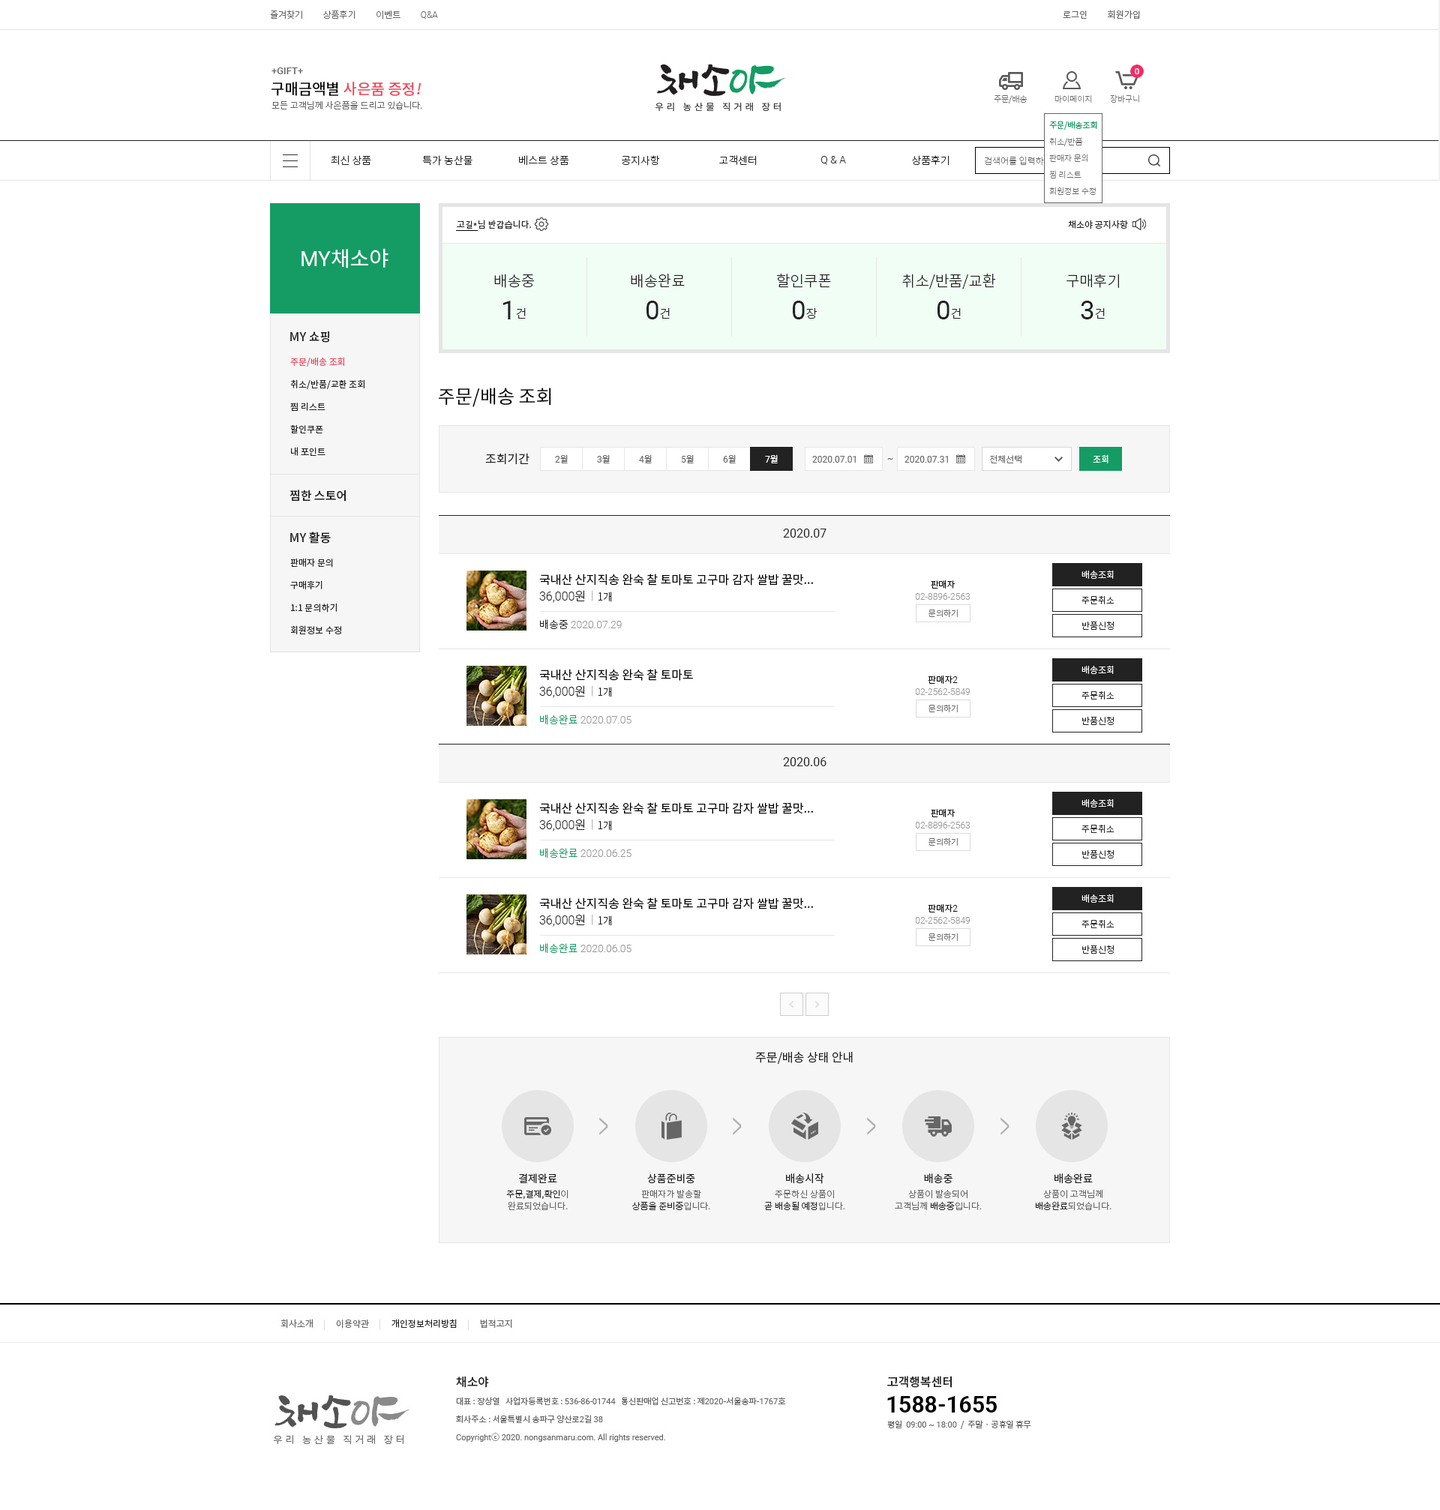
<style>
.page{position:relative;width:1440px;height:1510px;background:#ffffff}
.page>*{position:absolute;margin:0}
.t1{font:9px "NotoSansCJKkr-Light";color:#666666}
.t2{font:9px "Roboto-Light";color:#666666}
.t3{font:9px "NotoSansCJKkr-DemiLight";color:#666666}
.t4{font:9.7px "Roboto-Medium";color:#666666}
.t5{font:15px "NotoSansCJKkr-Medium";color:#ea475c}
.t6{font:15px "NotoSansCJKkr-Medium";color:#000000}
.t7{font:15px "NotoSansCJKkr-Medium";color:#ea475c;font-style:italic}
.t8{font:8.2px "NotoSansCJKkr-Thin";color:#666666}
.t9{font:8.2px/16.5px "NotoSansCJKkr-Thin";color:#666666}
.t10{font:8.2px/16.5px "NotoSansCJKkr-Regular";color:#159c65}
.t11{font:10.5px "NotoSansCJKkr-Light";color:#222222}
.t12{font:10.5px "Roboto-Light";color:#222222}
.t13{font:9px "NotoSansCJKkr-Thin";color:#666666}
.t14{font:9px "NotoSansCJKkr-Regular";color:#222222}
.t15{font:21px "NotoSansCJKkr-Regular";color:#ffffff}
.t16{font:21px "Roboto-Regular";color:#ffffff}
.t17{font:15px "NotoSansCJKkr-Light";color:#222222}
.t18{font:26.2px "Roboto-Regular";color:#222222}
.t19{font:12px "NotoSansCJKkr-Light";color:#222222}
.t20{font:12px "NotoSansCJKkr-Medium";color:#222222}
.t21{font:9px/22.5px "NotoSansCJKkr-Regular";color:#222222}
.t22{font:9px/22.5px "NotoSansCJKkr-Regular";color:#ea475c}
.t23{font:18.7px "NotoSansCJKkr-Regular";color:#000000}
.t24{font:12px "NotoSansCJKkr-Regular";color:#222222}
.t25{font:9px "Roboto-Regular";color:#666666}
.t26{font:9px "NotoSansCJKkr-Regular";color:#666666}
.t27{font:9px "Roboto-Regular";color:#ffffff}
.t28{font:9px "NotoSansCJKkr-Regular";color:#ffffff}
.t29{font:12px "Roboto-Regular";color:#222222}
.t30{font:9px "NotoSansCJKkr-Light";color:#ffffff}
.t31{font:12px "NotoSansCJKkr-Regular";color:#000000}
.t32{font:9px/12px "Roboto-Light";color:#999999}
.t33{font:9px/12px "NotoSansCJKkr-Light";color:#000000}
.t34{font:12px "Roboto-Light";color:#222222}
.t35{font:9px "NotoSansCJKkr-Light";color:#999999}
.t36{font:9px "NotoSansCJKkr-Light";color:#222222}
.t37{font:8.2px "NotoSansCJKkr-Light";color:#666666}
.t38{font:10.5px "Roboto-Light";color:#999999}
.t39{font:9px/12px "Roboto-Light";color:#000000}
.t40{font:10.5px "NotoSansCJKkr-Light";color:#159c65}
.t41{font:10.5px "NotoSansCJKkr-Regular";color:#222222}
.t42{font:9px/12px "NotoSansCJKkr-Light";color:#666666}
.t43{font:9px/12px "NotoSansCJKkr-Light";color:#222222}
</style>
<div class="page">
<p class="t1" style="left:270px;top:10px;width:168px;height:9px">즐겨찾기          상품후기          이벤트          <span class="t2">Q&amp;A</span></p>
<p class="t3" style="left:1063px;top:10px;width:77px;height:9px">로그인          회원가입</p>
<p class="t4" style="left:271px;top:67px;width:32px;height:7px">+GIFT+</p>
<p class="t5" style="left:271px;top:82px;width:150px;height:14px"><span class="t6">구매금액별 </span>사은품 증정<span class="t7">!</span></p>
<p class="t1" style="left:271px;top:100px;width:151px;height:9px">모든 고객님께 사은품을 드리고 있습니다.</p>
<p class="t8" style="left:994px;top:94px;width:33px;height:9px">주문/배송</p>
<p class="t8" style="left:1054px;top:95px;width:38px;height:8px">마이페이지</p>
<p class="t8" style="left:1110px;top:94px;width:29px;height:9px">장바구니</p>
<p class="t9" style="left:1049px;top:121px;width:48px;height:74px"><span class="t10">주문/배송조회<br></span>취소/반품<br>판매자 문의<br>찜 리스트<br>회원정보 수정</p>
<p class="t11" style="left:331px;top:155px;width:40px;height:10px">최신 상품</p>
<p class="t11" style="left:422px;top:155px;width:50px;height:11px">특가 농산물</p>
<p class="t11" style="left:519px;top:155px;width:50px;height:11px">베스트 상품</p>
<p class="t11" style="left:622px;top:155px;width:38px;height:11px">공지사항</p>
<p class="t11" style="left:719px;top:155px;width:38px;height:11px">고객센터</p>
<p class="t12" style="left:821px;top:156px;width:25px;height:9px">Q &amp; A</p>
<p class="t11" style="left:912px;top:155px;width:37px;height:11px">상품후기</p>
<p class="t13" style="left:984px;top:156px;width:76px;height:10px">검색어를 입력하세요</p>
<p class="t14" style="left:457px;top:220px;width:74px;height:9px">고길*님 반갑습니다.</p>
<p class="t14" style="left:1068px;top:220px;width:60px;height:9px">채소야 공지사항</p>
<p class="t15" style="left:301px;top:248px;width:87px;height:20px"><span class="t16">MY</span>채소야</p>
<p class="t17" style="left:494px;top:274px;width:40px;height:14px">배송중</p>
<p class="t17" style="left:631px;top:274px;width:54px;height:14px">배송완료</p>
<p class="t17" style="left:777px;top:274px;width:54px;height:14px">할인쿠폰</p>
<p class="t17" style="left:902px;top:274px;width:94px;height:15px">취소/반품/교환</p>
<p class="t17" style="left:1066px;top:274px;width:53px;height:14px">구매후기</p>
<p class="t18" style="left:502px;top:301px;width:24px;height:18px">1<span class="t19">건</span></p>
<p class="t18" style="left:646px;top:301px;width:24px;height:18px">0<span class="t19">건</span></p>
<p class="t18" style="left:793px;top:301px;width:24px;height:18px">0<span class="t19">장</span></p>
<p class="t18" style="left:937px;top:301px;width:24px;height:18px">0<span class="t19">건</span></p>
<p class="t18" style="left:1081px;top:301px;width:24px;height:18px">3<span class="t19">건</span></p>
<p class="t20" style="left:290px;top:331px;width:39px;height:12px">MY 쇼핑</p>
<p class="t21" style="left:290px;top:357px;width:74px;height:99px"><span class="t22">주문/배송 조회<br></span>취소/반품/교환 조회<br>찜 리스트<br>할인쿠폰<br>내 포인트</p>
<p class="t23" style="left:439px;top:388px;width:112px;height:19px">주문/배송 조회</p>
<p class="t24" style="left:485px;top:453px;width:44px;height:11px">조회기간</p>
<p class="t25" style="left:555px;top:454px;width:13px;height:9px">2<span class="t26">월</span></p>
<p class="t25" style="left:597px;top:454px;width:13px;height:9px">3<span class="t26">월</span></p>
<p class="t25" style="left:639px;top:454px;width:13px;height:9px">4<span class="t26">월</span></p>
<p class="t25" style="left:681px;top:454px;width:13px;height:9px">5<span class="t26">월</span></p>
<p class="t25" style="left:723px;top:454px;width:13px;height:9px">6<span class="t26">월</span></p>
<p class="t27" style="left:765px;top:454px;width:13px;height:9px">7<span class="t28">월</span></p>
<p class="t25" style="left:812px;top:456px;width:44px;height:7px">2020.07.01</p>
<p class="t25" style="left:887px;top:458px;width:6px;height:2px">~</p>
<p class="t25" style="left:904px;top:456px;width:44px;height:7px">2020.07.31</p>
<p class="t1" style="left:990px;top:455px;width:31px;height:8px">전체선택</p>
<p class="t28" style="left:1093px;top:454px;width:15px;height:9px">조회</p>
<p class="t20" style="left:289px;top:490px;width:57px;height:12px">찜한 스토어</p>
<p class="t20" style="left:290px;top:532px;width:41px;height:12px">MY 활동</p>
<p class="t29" style="left:783px;top:529px;width:43px;height:9px">2020.07</p>
<p class="t21" style="left:290px;top:558px;width:51px;height:76px">판매자 문의<br>구매후기<br>1:1 문의하기<br>회원정보 수정</p>
<p class="t30" style="left:1081px;top:570px;width:33px;height:9px">배송조회</p>
<p class="t31" style="left:539px;top:574px;width:274px;height:12px">국내산 산지직송 완숙 찰 토마토 고구마 감자 쌀밥 꿀맛...</p>
<p class="t32" style="left:915px;top:580px;width:55px;height:20px;text-align:center"><span class="t33">판매자<br></span>02-8896-2563</p>
<p class="t34" style="left:539px;top:590px;width:73px;height:13px">36,000<span class="t19">원  </span><span class="t35">|  </span><span class="t11">1개</span></p>
<p class="t36" style="left:1081px;top:596px;width:33px;height:8px">주문취소</p>
<p class="t37" style="left:928px;top:609px;width:30px;height:8px">문의하기</p>
<p class="t38" style="left:540px;top:619px;width:82px;height:11px"><span class="t11">배송중 </span>2020.07.29</p>
<p class="t36" style="left:1082px;top:621px;width:32px;height:9px">반품신청</p>
<p class="t30" style="left:1081px;top:665px;width:33px;height:9px">배송조회</p>
<p class="t31" style="left:539px;top:669px;width:154px;height:12px">국내산 산지직송 완숙 찰 토마토</p>
<p class="t32" style="left:915px;top:676px;width:55px;height:19px;text-align:center"><span class="t33">판매자</span><span class="t39">2<br></span>02-2562-5849</p>
<p class="t34" style="left:539px;top:685px;width:73px;height:13px">36,000<span class="t19">원  </span><span class="t35">|  </span><span class="t11">1개</span></p>
<p class="t36" style="left:1081px;top:691px;width:33px;height:9px">주문취소</p>
<p class="t37" style="left:928px;top:704px;width:30px;height:8px">문의하기</p>
<p class="t38" style="left:540px;top:715px;width:91px;height:10px"><span class="t40">배송완료 </span>2020.07.05</p>
<p class="t36" style="left:1082px;top:716px;width:32px;height:9px">반품신청</p>
<p class="t29" style="left:783px;top:757px;width:43px;height:9px">2020.06</p>
<p class="t31" style="left:539px;top:802px;width:274px;height:12px">국내산 산지직송 완숙 찰 토마토 고구마 감자 쌀밥 꿀맛...</p>
<p class="t32" style="left:915px;top:809px;width:55px;height:20px;text-align:center"><span class="t33">판매자<br></span>02-8896-2563</p>
<p class="t30" style="left:1081px;top:799px;width:33px;height:9px">배송조회</p>
<p class="t34" style="left:539px;top:819px;width:73px;height:13px">36,000<span class="t19">원  </span><span class="t35">|  </span><span class="t11">1개</span></p>
<p class="t36" style="left:1081px;top:825px;width:33px;height:8px">주문취소</p>
<p class="t37" style="left:928px;top:838px;width:30px;height:8px">문의하기</p>
<p class="t38" style="left:540px;top:848px;width:91px;height:11px"><span class="t40">배송완료 </span>2020.06.25</p>
<p class="t36" style="left:1082px;top:850px;width:32px;height:9px">반품신청</p>
<p class="t30" style="left:1081px;top:894px;width:33px;height:9px">배송조회</p>
<p class="t31" style="left:539px;top:898px;width:274px;height:12px">국내산 산지직송 완숙 찰 토마토 고구마 감자 쌀밥 꿀맛...</p>
<p class="t32" style="left:915px;top:904px;width:55px;height:20px;text-align:center"><span class="t33">판매자</span><span class="t39">2<br></span>02-2562-5849</p>
<p class="t34" style="left:539px;top:914px;width:73px;height:13px">36,000<span class="t19">원  </span><span class="t35">|  </span><span class="t11">1개</span></p>
<p class="t36" style="left:1081px;top:920px;width:33px;height:8px">주문취소</p>
<p class="t37" style="left:928px;top:933px;width:30px;height:8px">문의하기</p>
<p class="t38" style="left:540px;top:943px;width:91px;height:11px"><span class="t40">배송완료 </span>2020.06.05</p>
<p class="t36" style="left:1082px;top:945px;width:32px;height:9px">반품신청</p>
<p class="t24" style="left:755px;top:1051px;width:98px;height:13px">주문/배송 상태 안내</p>
<p class="t41" style="left:519px;top:1174px;width:38px;height:10px">결제완료</p>
<p class="t41" style="left:647px;top:1174px;width:48px;height:10px">상품준비중</p>
<p class="t41" style="left:786px;top:1174px;width:38px;height:10px">배송시작</p>
<p class="t41" style="left:924px;top:1174px;width:28px;height:10px">배송중</p>
<p class="t41" style="left:1054px;top:1174px;width:39px;height:10px">배송완료</p>
<p class="t42" style="left:506px;top:1189px;width:62px;height:22px;text-align:center"><span class="t43">주문,결제,확인</span>이<br>완료되었습니다.</p>
<p class="t42" style="left:632px;top:1189px;width:78px;height:21px;text-align:center">판매자가 발송할<br><span class="t43">상품을 준비중</span>입니다.</p>
<p class="t42" style="left:764px;top:1190px;width:81px;height:21px;text-align:center">주문하신 상품이<br><span class="t43">곧 배송될 예정</span>입니다.</p>
<p class="t42" style="left:895px;top:1189px;width:87px;height:21px;text-align:center">상품이 발송되어<br>고객님께 <span class="t43">배송중</span>입니다.</p>
<p class="t42" style="left:1035px;top:1189px;width:76px;height:22px;text-align:center">상품이 고객님께<br><span class="t43">배송완료</span>되었습니다.</p>
</div>
